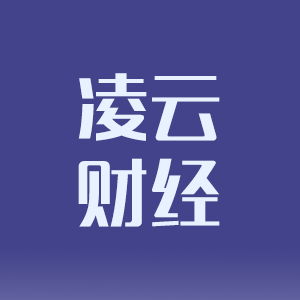
<style>
.page{position:relative;width:300px;height:300px;background:#43438c}
.page>*{position:absolute;margin:0}
.t1{font:71.1px "MFLangQian_Noncommercial-Regular";letter-spacing:0.025em;color:#e8f1ff}
</style>
<div class="page">
<p class="t1" style="left:78px;top:73px;width:142px;height:154px">凌云<br>财经</p>
</div>
